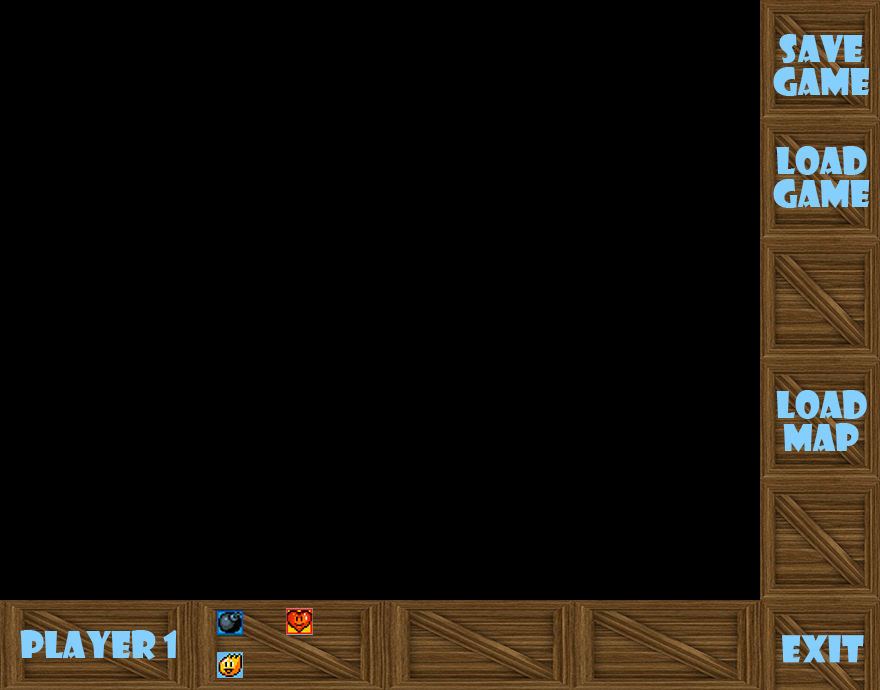
<style>
.page{position:relative;width:880px;height:690px;background:#000000}
.page>*{position:absolute;margin:0}
.t1{font:36px/33px "ShowcardGothic-Reg";color:#84cfff}
.t2{font:36px "ShowcardGothic-Reg";color:#84cfff}
</style>
<div class="page">
<p class="t1" style="left:773px;top:34px;width:97px;height:62px;text-align:center">SAVE<br>Game</p>
<p class="t1" style="left:773px;top:146px;width:97px;height:62px;text-align:center">Load<br>Game</p>
<p class="t1" style="left:776px;top:390px;width:91px;height:62px;text-align:center">Load<br>Map</p>
<p class="t2" style="left:20px;top:630px;width:157px;height:30px">Player 1</p>
<p class="t2" style="left:782px;top:635px;width:82px;height:28px">Exit</p>
</div>
